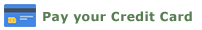
<style>
.page{position:relative;width:202px;height:30px;background:#ffffff}
.page>*{position:absolute;margin:0}
.t1{font:12.5px "Verdana-Bold";letter-spacing:0.025em;color:#587d52}
</style>
<div class="page">
<p class="t1" style="left:43px;top:11px;width:149px;height:13px">Pay your Credit Card</p>
</div>
